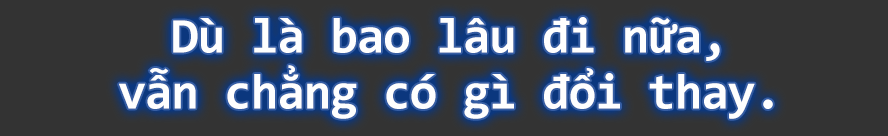
<style>
.page{position:relative;width:888px;height:136px;background:#333333}
.page>*{position:absolute;margin:0}
.t1{font:50px/48px "Consolas-Bold";letter-spacing:-0.02em;color:#fefefe}
</style>
<div class="page">
<p class="t1" style="left:119px;top:17px;width:654px;height:102px;text-align:center">Dù là bao lâu đi nữa,<br>vẫn chẳng có gì đổi thay.</p>
</div>
